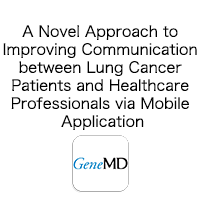
<style>
.page{position:relative;width:200px;height:200px;background:#ffffff}
.page>*{position:absolute;margin:0}
.t1{font:15px "HiraKakuPro-W3";color:#000000}
</style>
<div class="page">
<p class="t1" style="left:3px;top:25px;width:194px;height:105px;text-align:center">A Novel Approach to <br>Improving Communication <br>between Lung Cancer <br>Patients and Healthcare <br>Professionals via Mobile <br>Application</p>
</div>
